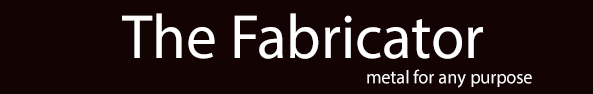
<style>
.page{position:relative;width:593px;height:94px;background:#130303}
.page>*{position:absolute;margin:0}
.t1{font:62.5px "MyriadPro-Regular";color:#ffffff}
.t2{font:18.8px "MyriadPro-Regular";color:#ffffff}
</style>
<div class="page">
<p class="t1" style="left:122px;top:13px;width:362px;height:46px">The Fabricator</p>
<p class="t2" style="left:367px;top:69px;width:165px;height:19px">metal for any purpose</p>
</div>
